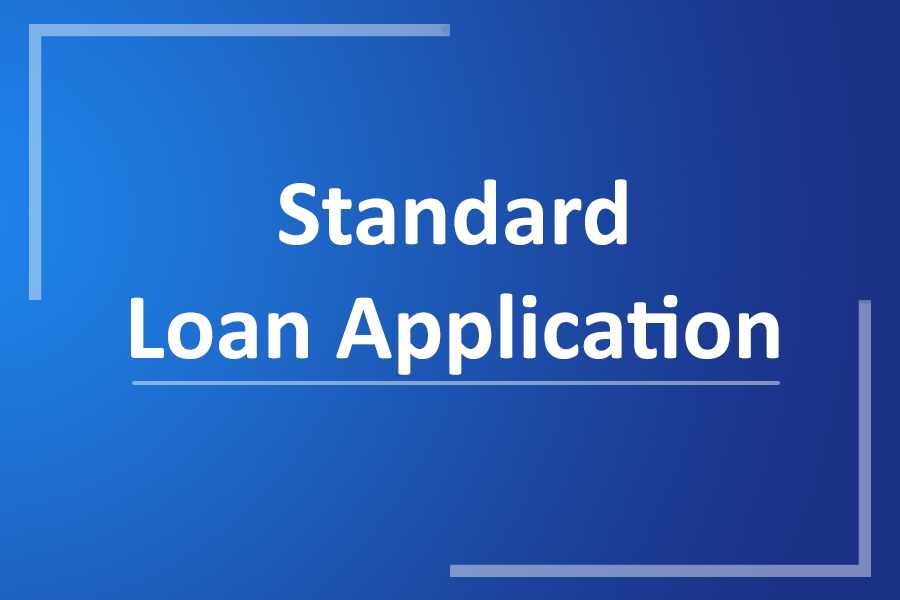
<style>
.page{position:relative;width:900px;height:600px}
.page>*{position:absolute;margin:0}
.t1{font:95px "Calibri-Bold";color:#ffffff}
</style>
<div class="page">
<p class="t1" style="left:131px;top:179px;width:648px;height:196px;text-align:center">Standard<br>Loan Application</p>
</div>
